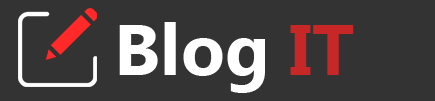
<style>
.page{position:relative;width:435px;height:101px;background:#333333}
.page>*{position:absolute;margin:0}
.t1{font:72px "Ebrima-Bold";color:#ffffff}
.t2{font:72px "Ebrima-Bold";color:#c72727}
</style>
<div class="page">
<p class="t1" style="left:119px;top:22px;width:235px;height:71px">Blog <span class="t2">IT</span></p>
</div>
